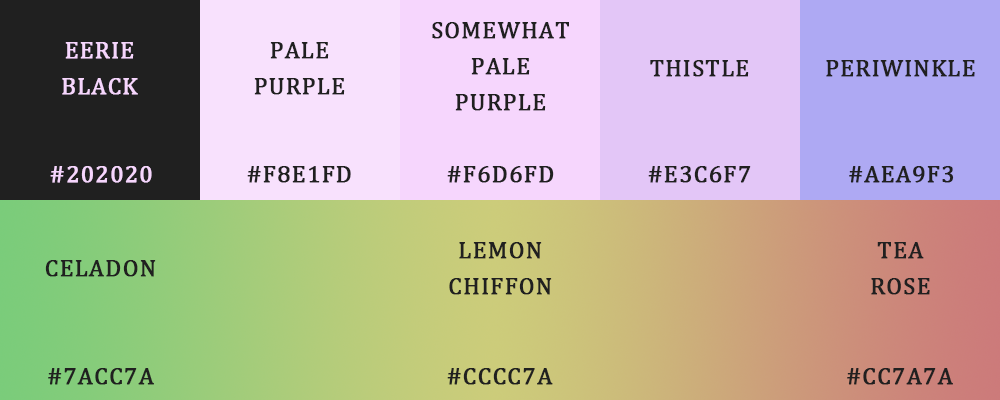
<style>
.page{position:relative;width:1000px;height:400px}
.page>*{position:absolute;margin:0}
.t1{font:24px/36px "Cambria";letter-spacing:0.03em;color:#202020;text-transform:uppercase;font-weight:bold}
.t2{font:24px/36px "Cambria";letter-spacing:0.03em;color:#f6d6fd;text-transform:uppercase;font-weight:bold}
.t3{font:24px "Cambria";letter-spacing:0.03em;color:#202020;text-transform:uppercase;font-weight:bold}
.t4{font:24px "Cambria";letter-spacing:0.03em;color:#f6d6fd;text-transform:uppercase;font-weight:bold}
</style>
<div class="page">
<p class="t1" style="left:432px;top:22px;width:137px;height:89px;text-align:center">Somewhat<br>Pale<br>Purple</p>
<p class="t2" style="left:62px;top:42px;width:76px;height:53px;text-align:center">Eerie<br>black</p>
<p class="t1" style="left:254px;top:42px;width:91px;height:53px;text-align:center">Pale<br>Purple</p>
<p class="t3" style="left:650px;top:60px;width:99px;height:17px">Thistle</p>
<p class="t3" style="left:826px;top:60px;width:149px;height:17px">Periwinkle</p>
<p class="t4" style="left:50px;top:166px;width:102px;height:17px">#202020</p>
<p class="t3" style="left:247px;top:166px;width:104px;height:17px">#F8E1FD</p>
<p class="t3" style="left:447px;top:166px;width:107px;height:17px">#F6D6FD</p>
<p class="t3" style="left:648px;top:166px;width:103px;height:17px">#E3C6F7</p>
<p class="t3" style="left:849px;top:166px;width:105px;height:17px">#AEA9F3</p>
<p class="t1" style="left:449px;top:242px;width:103px;height:53px;text-align:center">Lemon<br>Chiffon</p>
<p class="t1" style="left:871px;top:242px;width:59px;height:53px;text-align:center">Tea<br>Rose</p>
<p class="t3" style="left:45px;top:260px;width:111px;height:17px">Celadon</p>
<p class="t3" style="left:48px;top:368px;width:106px;height:17px">#7ACC7A</p>
<p class="t3" style="left:447px;top:368px;width:106px;height:17px">#CCCC7A</p>
<p class="t3" style="left:847px;top:368px;width:106px;height:17px">#CC7A7A</p>
</div>
